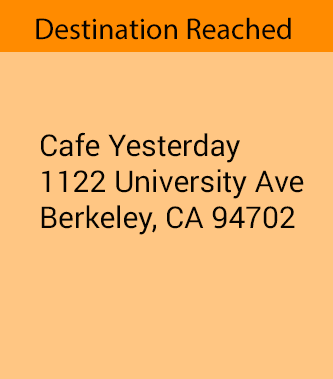
<style>
.page{position:relative;width:333px;height:379px;background:#ffc683}
.page>*{position:absolute;margin:0}
.t1{font:30px "MyriadPro-Regular";color:#050300}
.t2{font:30px "Roboto-Black";color:#050300}
</style>
<div class="page">
<p class="t1" style="left:36px;top:17px;width:255px;height:23px">Destination Reached</p>
<p class="t2" style="left:41px;top:132px;width:263px;height:103px">Cafe Yesterday<br>1122 University Ave<br>Berkeley, CA 94702</p>
</div>
